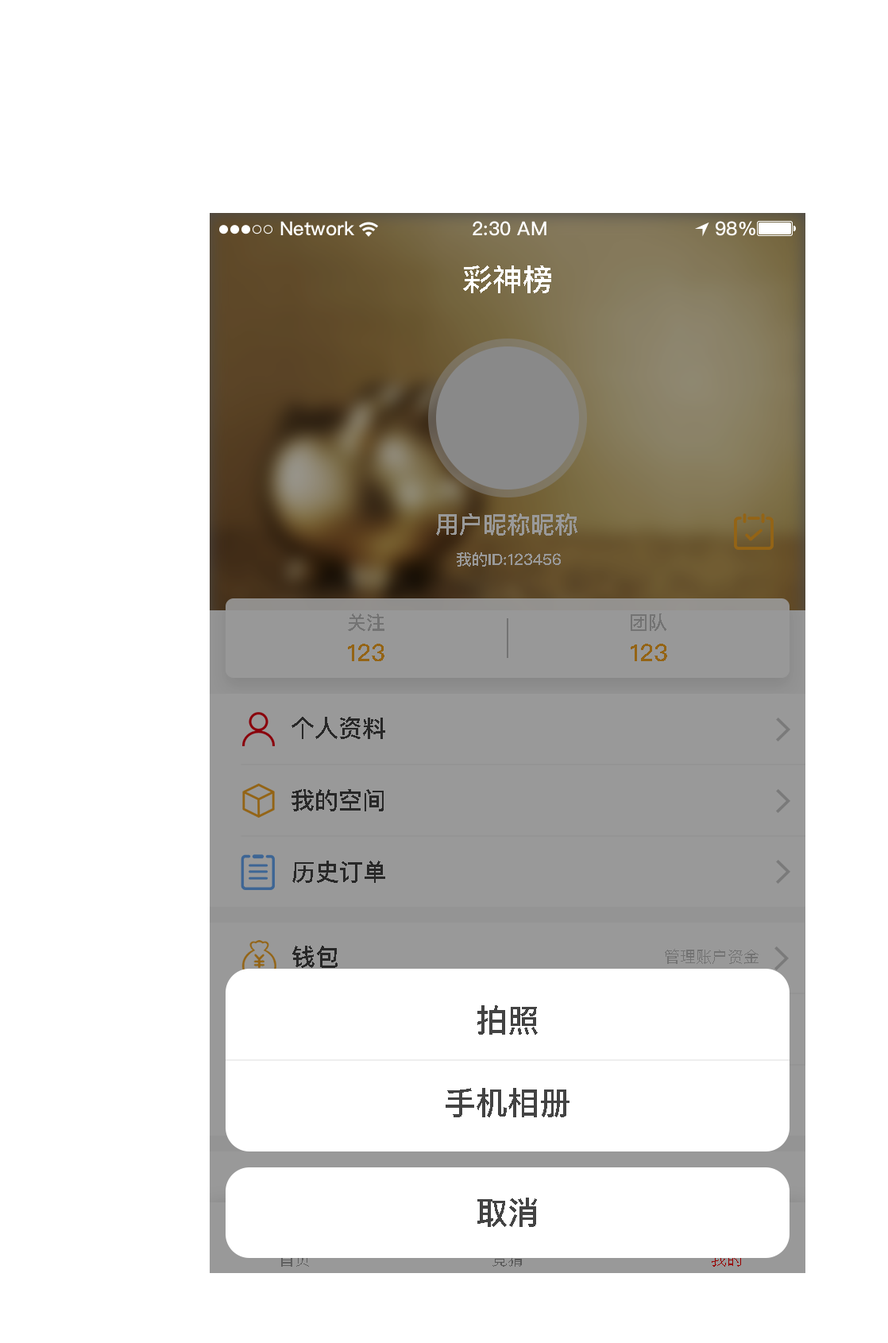
<style>
.page{position:relative;width:888px;height:1343px;background:#ffffff}
.page>*{position:absolute;margin:0}
.t1{font:30.2px "PingFangSC-Medium";color:#ffffff;text-transform:uppercase}
.t2{font:23.8px "PingFangSC-Medium";color:#999999;text-transform:uppercase}
.t3{font:15.9px "PingFangSC-Medium";color:#999999;text-transform:uppercase}
.t4{font:19.1px "PingFangSC-Medium";color:#737373;text-transform:uppercase}
.t5{font:23.8px "PingFangSC-Medium";color:#946415;text-transform:uppercase}
.t6{font:23.8px "PingFangSC-Medium";color:#282828;text-transform:uppercase}
.t7{font:15.9px "PingFangSC-Regular";color:#737373;text-transform:uppercase}
.t8{font:31.8px "PingFangSC-Medium";color:#434343;text-transform:uppercase}
.t9{font:15.9px "PingFangSC-Regular";text-transform:uppercase}
</style>
<div class="page">
<p class="t1" style="left:463px;top:265px;width:88px;height:28px">彩神榜</p>
<p class="t2" style="left:436px;top:513px;width:142px;height:22px">用户昵称昵称</p>
<p class="t3" style="left:457px;top:552px;width:104px;height:14px">我的id:123456</p>
<p class="t4" style="left:348px;top:613px;width:37px;height:18px">关注</p>
<p class="t4" style="left:631px;top:613px;width:36px;height:18px">团队</p>
<p class="t5" style="left:348px;top:643px;width:37px;height:18px">123</p>
<p class="t5" style="left:631px;top:643px;width:36px;height:18px">123</p>
<p class="t6" style="left:292px;top:717px;width:93px;height:22px">个人资料</p>
<p class="t6" style="left:292px;top:789px;width:92px;height:22px">我的空间</p>
<p class="t6" style="left:292px;top:860px;width:93px;height:23px">历史订单</p>
<p class="t6" style="left:292px;top:945px;width:46px;height:23px">钱包</p>
<p class="t7" style="left:665px;top:949px;width:94px;height:15px">管理账户资金</p>
<p class="t8" style="left:477px;top:1005px;width:61px;height:29px">拍照</p>
<p class="t8" style="left:446px;top:1088px;width:124px;height:29px">手机相册</p>
<p class="t8" style="left:477px;top:1197px;width:60px;height:30px">取消</p>
<p class="t9" style="left:712px;top:1251px;width:29px;height:15px">我的</p>
</div>
